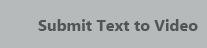
<style>
.page{position:relative;width:207px;height:48px;background:#b7babb}
.page>*{position:absolute;margin:0}
.t1{font:16px "Ebrima-Bold";color:#525556}
</style>
<div class="page">
<p class="t1" style="left:38px;top:19px;width:160px;height:12px">Submit Text to Video</p>
</div>
